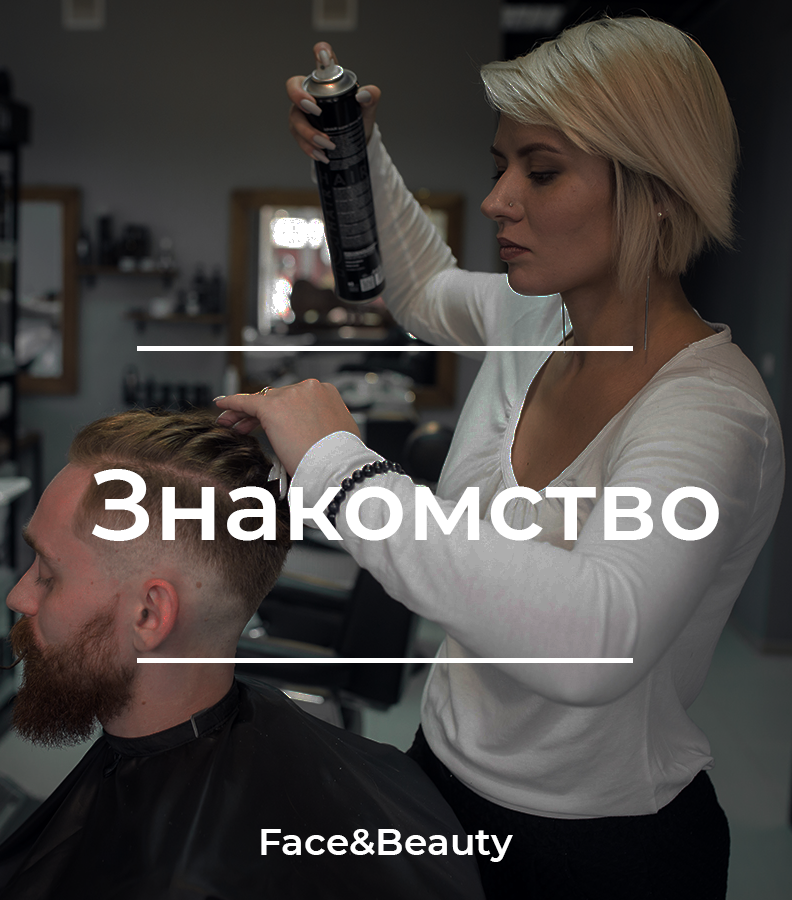
<style>
.page{position:relative;width:792px;height:900px}
.page>*{position:absolute;margin:0}
.t1{font:100px "Montserrat-SemiBold";color:#ffffff}
.t2{font:37.5px "Montserrat-SemiBold";color:#ffffff}
</style>
<div class="page">
<p class="t1" style="left:91px;top:469px;width:628px;height:72px">Знакомство</p>
<p class="t2" style="left:261px;top:829px;width:252px;height:33px">Face&amp;Beauty</p>
</div>
